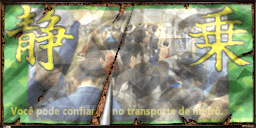
<style>
.page{position:relative;width:256px;height:128px}
.page>*{position:absolute;margin:0}
.t1{font:10.7px "MicrosoftPhagsPa-Bold";font-weight:bold;scale:0.88 1}
</style>
<div class="page">
<p class="t1" style="left:10px;top:106px;width:213px;height:12px">Você pode confiar      no transporte de metrô.</p>
</div>
